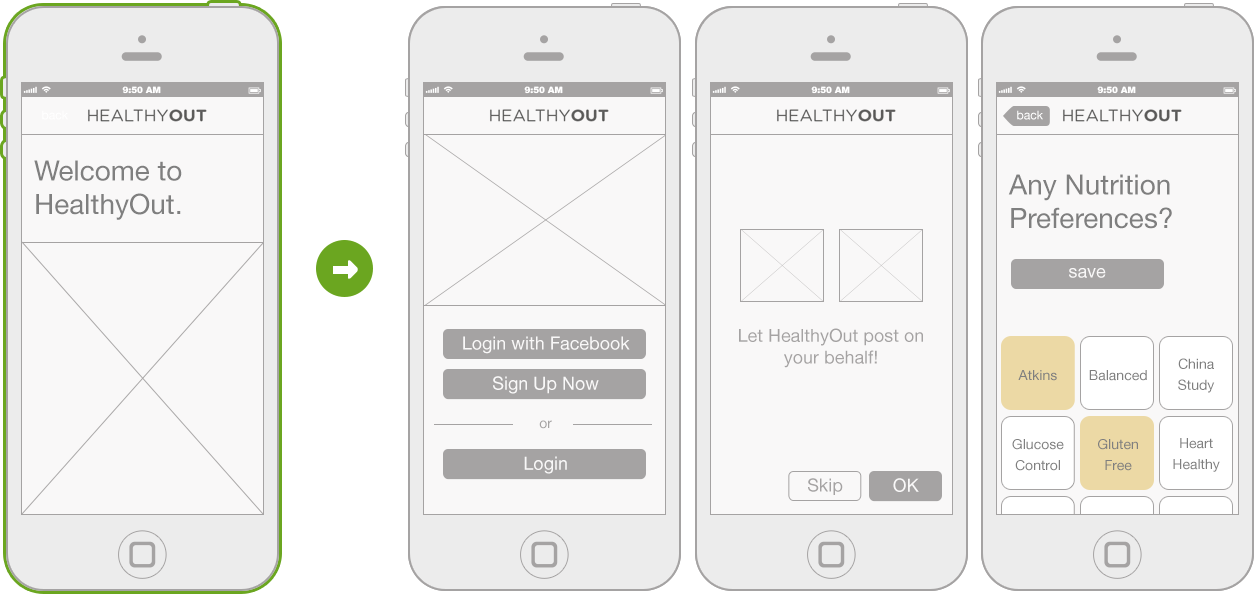
<style>
.page{position:relative;width:1254px;height:594px;background:#f9f8f8}
.page>*{position:absolute;margin:0}
.t1{font:8.7px "Arial-Black";color:#ffffff;text-transform:uppercase}
.t2{font:12px "HelveticaNeue";color:#ffffff}
.t3{font:28px "HelveticaNeue";color:#7f7f7f}
.t4{font:18.3px "HelveticaNeue";color:#f9f8f8}
.t5{font:18px "HelveticaNeue";color:#a5a3a3}
.t6{font:13.9px/21px "HelveticaNeue";color:#7f7f7f}
.t7{font:13.9px "HelveticaNeue";color:#7f7f7f}
.t8{font:14px "HelveticaNeue";color:#a5a3a3}
.t9{font:13.9px/20.9px "HelveticaNeue";color:#7f7f7f}
.t10{font:18.3px "HelveticaNeue";color:#a5a3a3}
</style>
<div class="page">
<p class="t1" style="left:122px;top:86px;width:39px;height:8px">9:50 AM</p>
<p class="t1" style="left:524px;top:86px;width:39px;height:8px">9:50 AM</p>
<p class="t1" style="left:811px;top:86px;width:39px;height:8px">9:50 AM</p>
<p class="t1" style="left:1097px;top:86px;width:39px;height:8px">9:50 AM</p>
<p class="t2" style="left:42px;top:110px;width:26px;height:10px">back</p>
<p class="t2" style="left:1017px;top:110px;width:26px;height:10px">back</p>
<p class="t3" style="left:34px;top:160px;width:148px;height:60px">Welcome to HealthyOut.</p>
<p class="t3" style="left:1008px;top:174px;width:164px;height:55px">Any Nutrition Preferences?</p>
<p class="t4" style="left:1069px;top:268px;width:37px;height:10px">save</p>
<p class="t5" style="left:739px;top:328px;width:184px;height:40px;text-align:center">Let HealthyOut post on your behalf!</p>
<p class="t4" style="left:463px;top:336px;width:167px;height:18px">Login with Facebook</p>
<p class="t6" style="left:1178px;top:358px;width:37px;height:35px;text-align:center">China Study</p>
<p class="t4" style="left:493px;top:376px;width:106px;height:18px">Sign Up Now</p>
<p class="t7" style="left:1018px;top:370px;width:39px;height:11px">Atkins</p>
<p class="t7" style="left:1089px;top:370px;width:58px;height:11px">Balanced</p>
<p class="t8" style="left:539px;top:420px;width:13px;height:9px">or</p>
<p class="t9" style="left:1173px;top:438px;width:47px;height:34px;text-align:center">Heart Healthy</p>
<p class="t9" style="left:1012px;top:439px;width:52px;height:32px;text-align:center">Glucose Control</p>
<p class="t9" style="left:1098px;top:439px;width:40px;height:32px;text-align:center">Gluten <br>Free</p>
<p class="t4" style="left:524px;top:456px;width:43px;height:18px">Login</p>
<p class="t10" style="left:808px;top:478px;width:35px;height:17px">Skip</p>
<p class="t4" style="left:893px;top:478px;width:26px;height:14px">OK</p>
</div>
